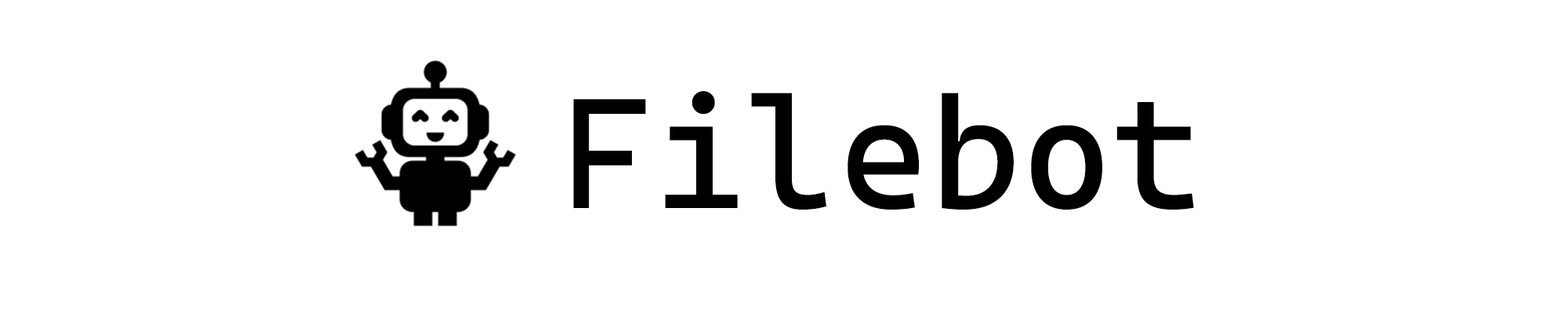
<style>
.page{position:relative;width:1568px;height:314px;background:#ffffff}
.page>*{position:absolute;margin:0}
.t1{font:156.8px "CascadiaCode-Regular";color:#000000;font-weight:bold}
</style>
<div class="page">
<p class="t1" style="left:573px;top:91px;width:621px;height:118px">Filebot</p>
</div>
